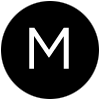
<style>
.page{position:relative;width:100px;height:100px;background:#000000}
.page>*{position:absolute;margin:0}
.t1{font:58.4px "Gotham-Book";letter-spacing:-0.02em;color:#ffffff}
</style>
<div class="page">
<p class="t1" style="left:29px;top:27px;width:40px;height:42px">M</p>
</div>
